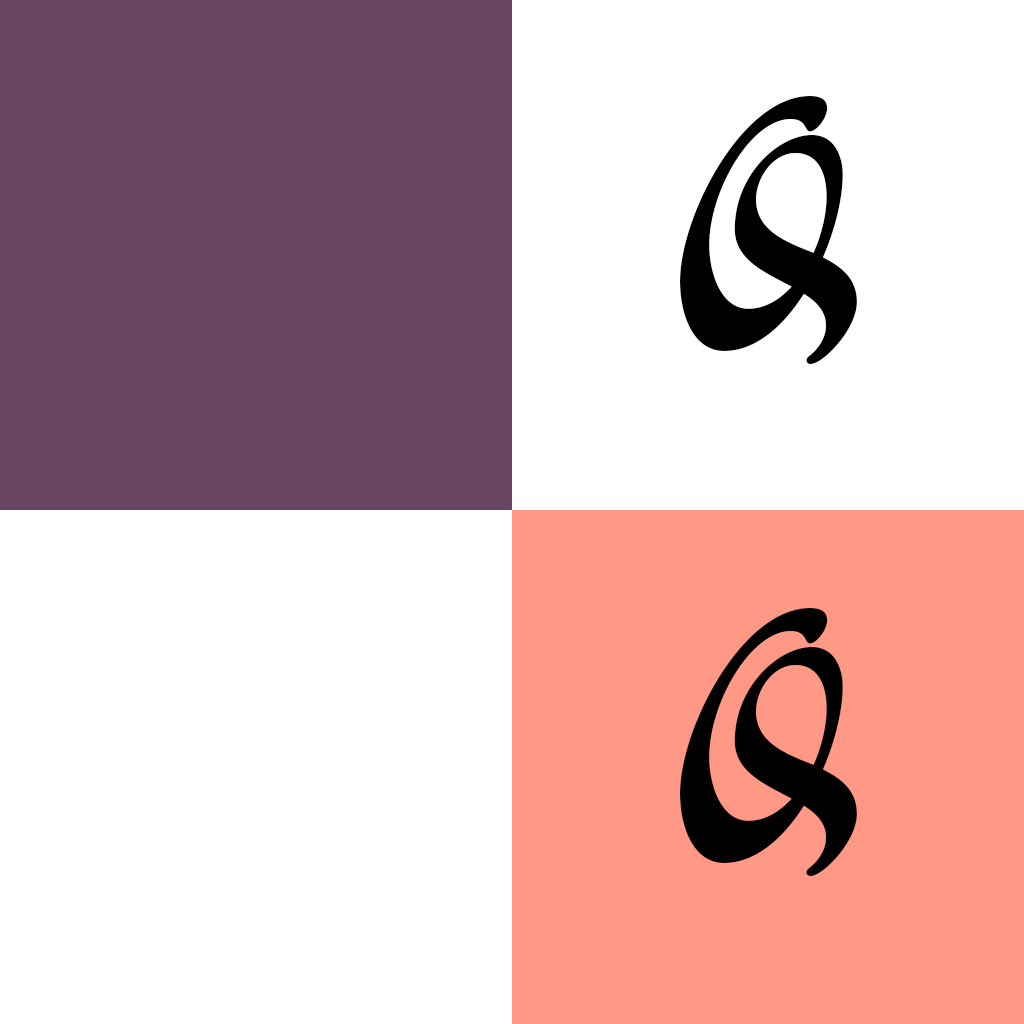
<style>
.page{position:relative;width:1024px;height:1024px;background:#ffffff}
.page>*{position:absolute;margin:0}
.t1{font:283px "DrSugiyamaPro";color:#000000}
</style>
<div class="page">
<p class="t1" style="left:680px;top:96px;width:177px;height:268px">Q</p>
<p class="t1" style="left:680px;top:608px;width:177px;height:268px">Q</p>
</div>
